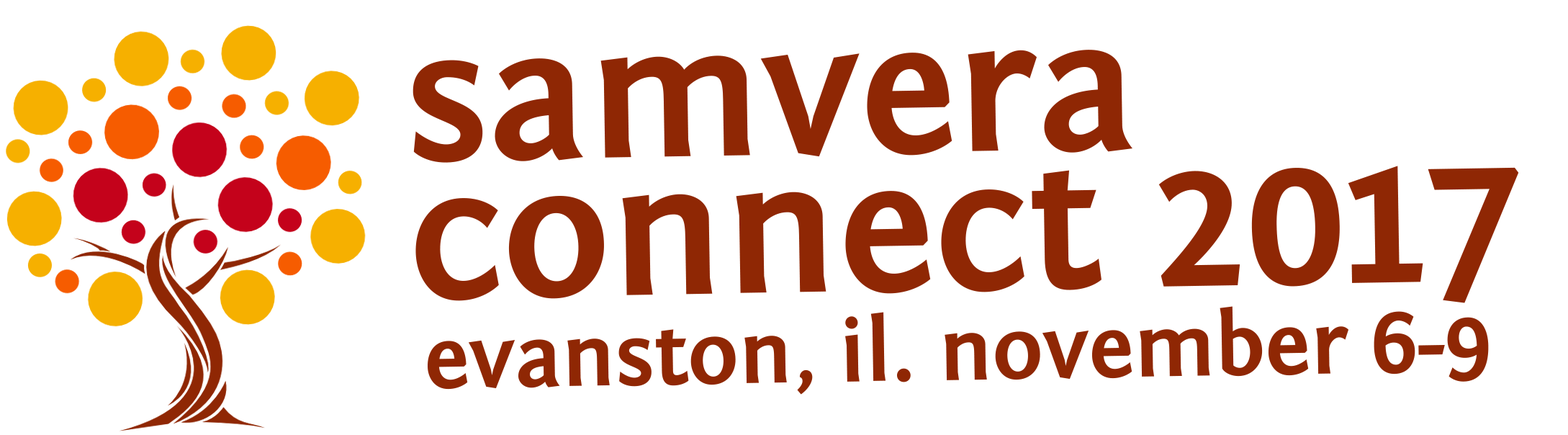
<style>
.page{position:relative;width:1568px;height:435px;background:#ffffff}
.page>*{position:absolute;margin:0}
.t1{font:90px/90px "FontinSans-Bold";color:#8f2704}
.t2{font:192px/138px "FontinSans-Bold";color:#8f2704}
</style>
<div class="page">
<p class="t1" style="left:413px;top:50px;width:1106px;height:345px;rotate:-1deg"><span class="t2">samvera<br>connect 2017<br> </span>evanston, il. november 6-9</p>
</div>
